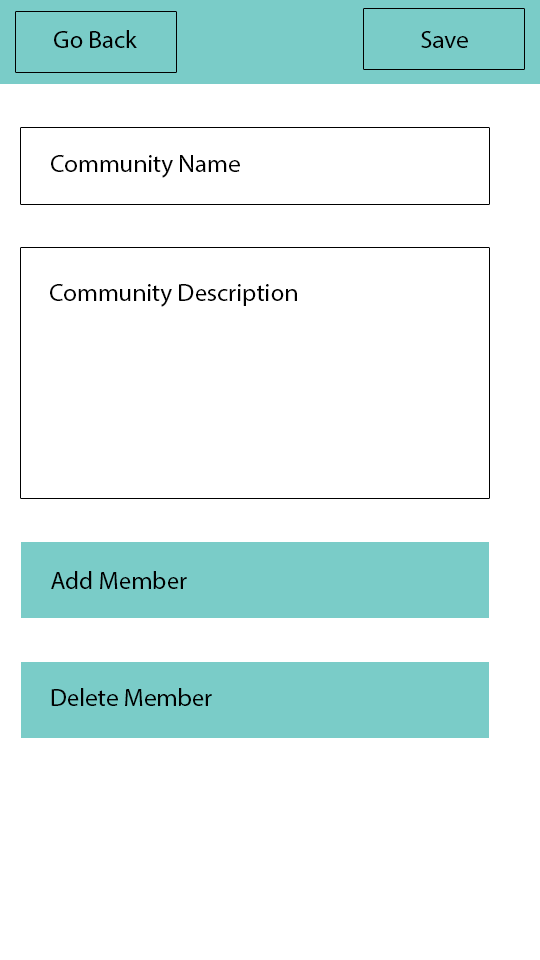
<style>
.page{position:relative;width:540px;height:960px;background:#ffffff}
.page>*{position:absolute;margin:0}
.t1{font:25px "MyriadPro-Regular";color:#000000}
</style>
<div class="page">
<p class="t1" style="left:54px;top:30px;width:83px;height:18px">Go Back</p>
<p class="t1" style="left:421px;top:31px;width:47px;height:17px">Save</p>
<p class="t1" style="left:51px;top:155px;width:189px;height:23px">Community Name</p>
<p class="t1" style="left:50px;top:284px;width:247px;height:23px">Community Description</p>
<p class="t1" style="left:51px;top:571px;width:136px;height:18px">Add Member</p>
<p class="t1" style="left:51px;top:688px;width:161px;height:18px">Delete Member</p>
</div>
